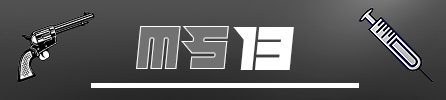
<style>
.page{position:relative;width:446px;height:100px}
.page>*{position:absolute;margin:0}
.t1{font:62.5px "Hindsight2020";color:#737272;scale:0.94 1}
.t2{font:62.5px "Hindsight2020";color:#ffffff;scale:0.94 1}
</style>
<div class="page">
<p class="t1" style="left:136px;top:26px;width:93px;height:43px">m S</p>
<p class="t2" style="left:233px;top:27px;width:61px;height:43px">13</p>
</div>
